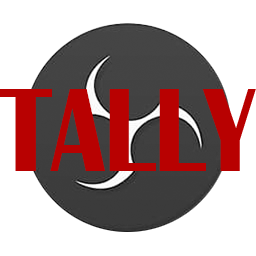
<style>
.page{position:relative;width:256px;height:256px;background:#ffffff}
.page>*{position:absolute;margin:0}
.t1{font:123.4px "BritannicBold";color:#b80101;scale:0.8 1}
</style>
<div class="page">
<p class="t1" style="left:0px;top:89px;width:256px;height:82px">TALLY</p>
</div>
